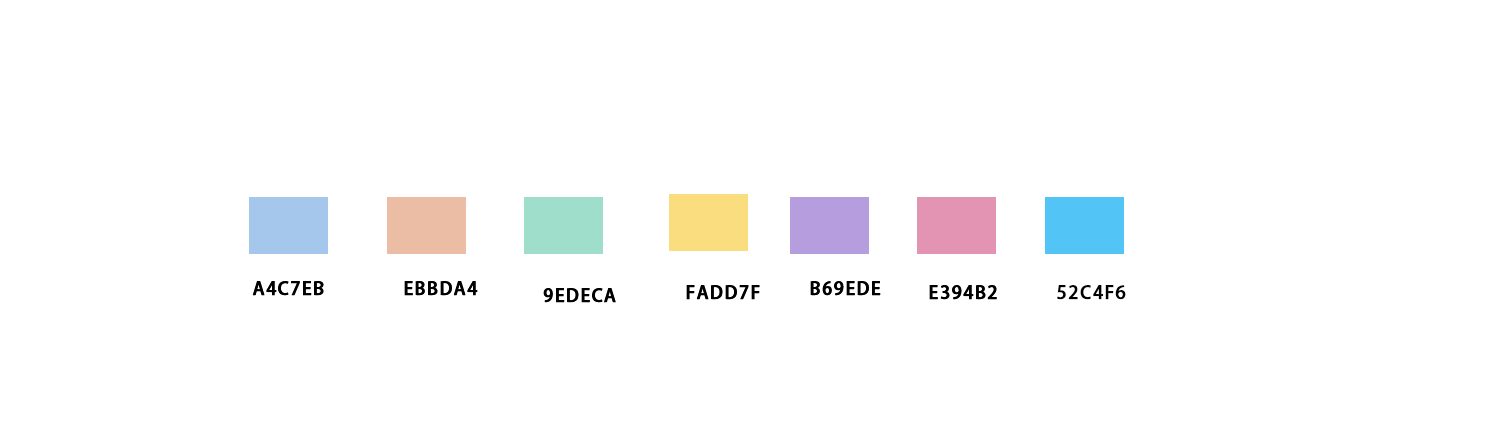
<style>
.page{position:relative;width:1500px;height:432px;background:#ffffff}
.page>*{position:absolute;margin:0}
.t1{font:18px "AdobeHeitiStd-Regular";letter-spacing:0.06em;color:#000000;text-transform:uppercase;font-weight:bold}
</style>
<div class="page">
<p class="t1" style="left:252px;top:281px;width:72px;height:15px">a4c7eb</p>
<p class="t1" style="left:252px;top:281px;width:72px;height:15px">a4c7eb</p>
<p class="t1" style="left:404px;top:281px;width:74px;height:15px">ebbda4</p>
<p class="t1" style="left:404px;top:281px;width:74px;height:15px">ebbda4</p>
<p class="t1" style="left:810px;top:281px;width:71px;height:15px">b69ede</p>
<p class="t1" style="left:810px;top:281px;width:71px;height:15px">b69ede</p>
<p class="t1" style="left:543px;top:288px;width:73px;height:15px">9edeca</p>
<p class="t1" style="left:543px;top:288px;width:73px;height:15px">9edeca</p>
<p class="t1" style="left:686px;top:285px;width:74px;height:15px">fadd7f</p>
<p class="t1" style="left:686px;top:285px;width:74px;height:15px">fadd7f</p>
<p class="t1" style="left:929px;top:285px;width:68px;height:15px">e394b2</p>
<p class="t1" style="left:929px;top:285px;width:68px;height:15px">e394b2</p>
<p class="t1" style="left:1057px;top:285px;width:69px;height:15px">52c4f6</p>
</div>
